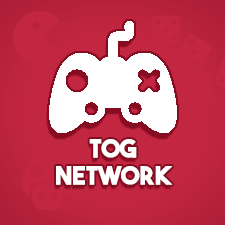
<style>
.page{position:relative;width:225px;height:225px;background:#c32640}
.page>*{position:absolute;margin:0}
.t1{font:25px "TheBoldFont";color:#ffffff}
</style>
<div class="page">
<p class="t1" style="left:89px;top:139px;width:48px;height:19px">TOG</p>
<p class="t1" style="left:56px;top:166px;width:117px;height:19px">Network</p>
</div>
